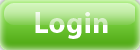
<style>
.page{position:relative;width:140px;height:50px}
.page>*{position:absolute;margin:0}
.t1{font:30px "MyriadPro-Bold"}
</style>
<div class="page">
<p class="t1" style="left:35px;top:12px;width:73px;height:27px">Login</p>
</div>
